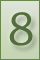
<style>
.page{position:relative;width:40px;height:60px}
.page>*{position:absolute;margin:0}
.t1{font:50px "ChaparralPro-Regular";color:#546d40}
</style>
<div class="page">
<p class="t1" style="left:9px;top:12px;width:24px;height:34px">8</p>
</div>
